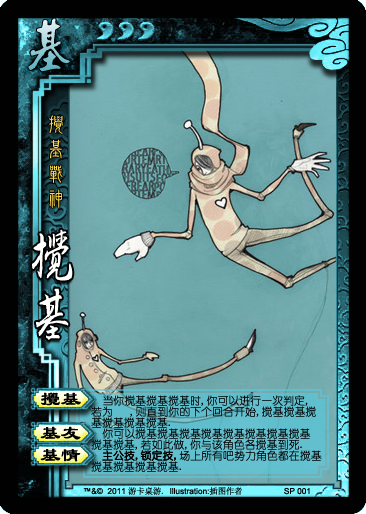
<style>
.page{position:relative;width:366px;height:514px}
.page>*{position:absolute;margin:0}
.t1{font:53.3px "ª÷±ö¬y¦æ®Ñ"}
.t2{font:21.3px "DFNewChuan-Md-HKP-BF";color:#fcdb55}
.t3{font:50.7px "ª÷±ö¯ó¦æ®Ñ";color:#fffffe;font-weight:bold}
.t4{font:20px "FZLSFW--GB1-0";color:#000000;font-weight:bold}
.t5{font:10.7px "YouYuan";color:#000000;font-weight:bold}
.t6{font:8.3px "ArialMT";color:#000000}
.t7{font:8.3px "SimSun";color:#000000}
</style>
<div class="page">
<p class="t1" style="left:28px;top:18px;width:42px;height:54px">基</p>
<p class="t2" style="left:49px;top:115px;width:14px;height:93px">攪 基 戰 神</p>
<p class="t3" style="left:32px;top:229px;width:41px;height:111px">攪 基</p>
<p class="t4" style="left:41px;top:392px;width:40px;height:14px">搅基</p>
<p class="t5" style="left:103px;top:395px;width:205px;height:11px">当你搅基搅基搅基时,你可以进行一次判定,</p>
<p class="t5" style="left:91px;top:406px;width:225px;height:11px">若为   ,则直到你的下个回合开始,搅基搅基搅</p>
<p class="t5" style="left:91px;top:417px;width:79px;height:11px">基搅基搅基搅基.</p>
<p class="t4" style="left:40px;top:426px;width:41px;height:14px">基友</p>
<p class="t5" style="left:102px;top:428px;width:209px;height:11px">你可以搅基搅基搅基搅基搅基搅基搅基搅基</p>
<p class="t4" style="left:40px;top:448px;width:41px;height:14px">基情</p>
<p class="t5" style="left:91px;top:439px;width:211px;height:11px">搅基搅基,若如此做,你与该角色各搅基到死.</p>
<p class="t5" style="left:91px;top:461px;width:90px;height:11px">搅基搅基搅基搅基.</p>
<p class="t5" style="left:102px;top:450px;width:220px;height:11px">主公技,锁定技,场上所有吧势力角色都在搅基</p>
<p class="t5" style="left:102px;top:450px;width:74px;height:11px">主公技,锁定技,</p>
<p class="t6" style="left:83px;top:487px;width:227px;height:8px">™&amp;©  2011 <span class="t7">游卡桌游. </span>Illustration:<span class="t7">插图作者                  </span>SP 001</p>
</div>
